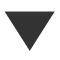
<style>
.page{position:relative;width:60px;height:60px;background:#ffffff}
.page>*{position:absolute;margin:0}
.t1{font:64.3px "Gulim";color:#333333}
</style>
<div class="page">
<p class="t1" style="left:4px;top:11px;width:51px;height:40px">▼</p>
</div>
